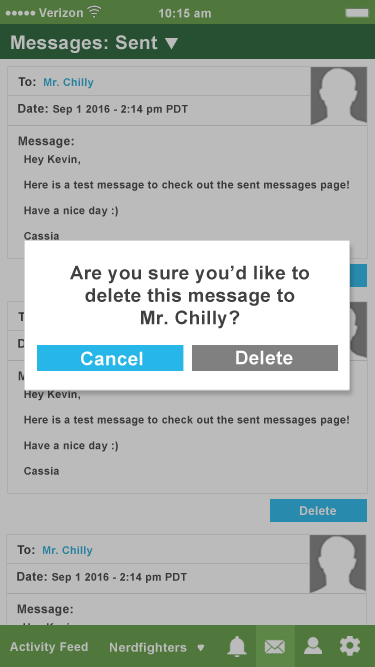
<style>
.page{position:relative;width:375px;height:667px;background:#bbbbbb}
.page>*{position:absolute;margin:0}
.t1{font:12px "Arial-BoldMT";letter-spacing:0.025em;color:#bbbbbb}
.t2{font:18.7px "Arial-BoldMT";letter-spacing:0.025em;color:#bbbbbb}
.t3{font:12px "Arial-BoldMT";letter-spacing:0.025em;color:#333333}
.t4{font:10.7px "Arial-BoldMT";letter-spacing:0.025em;color:#2681a1}
.t5{font:10.7px "Arial-BoldMT";letter-spacing:0.025em;color:#404040}
.t6{font:12px "Arial-BoldMT";letter-spacing:0.025em;color:#404040}
.t7{font:18.7px "Arial-BoldMT";letter-spacing:0.025em;color:#404040}
.t8{font:12px "Arial-BoldMT";letter-spacing:0.025em}
.t9{font:18.7px "Arial-BoldMT";letter-spacing:0.025em;color:#ffffff}
.t10{font:12.5px "Arial-BoldMT";letter-spacing:0.025em;color:#bbbbbb}
</style>
<div class="page">
<p class="t1" style="left:39px;top:8px;width:44px;height:9px">Verizon</p>
<p class="t1" style="left:159px;top:8px;width:52px;height:10px">10:15 am</p>
<p class="t2" style="left:11px;top:35px;width:147px;height:18px">Messages: Sent</p>
<p class="t3" style="left:18px;top:77px;width:18px;height:9px">To:</p>
<p class="t4" style="left:44px;top:78px;width:50px;height:11px">Mr. Chilly</p>
<p class="t5" style="left:18px;top:104px;width:170px;height:11px"><span class="t6">Date: </span>Sep 1 2016 - 2:14 pm PDT</p>
<p class="t6" style="left:18px;top:136px;width:56px;height:12px">Message:</p>
<p class="t5" style="left:24px;top:155px;width:325px;height:85px">Hey Kevin,<br><br>Here is a test message to check out the sent messages page!<br><br>Have a nice day :)<br><br>Cassia</p>
<p class="t7" style="left:70px;top:265px;width:239px;height:64px;text-align:center">Are you sure you’d like to delete this message to <br>Mr. Chilly?</p>
<p class="t8" style="left:18px;top:312px;width:18px;height:9px">To:</p>
<p class="t9" style="left:81px;top:351px;width:62px;height:15px">Cancel</p>
<p class="t9" style="left:236px;top:350px;width:57px;height:15px">Delete</p>
<p class="t5" style="left:24px;top:390px;width:325px;height:85px">Hey Kevin,<br><br>Here is a test message to check out the sent messages page!<br><br>Have a nice day :)<br><br>Cassia</p>
<p class="t1" style="left:300px;top:506px;width:36px;height:9px">Delete</p>
<p class="t3" style="left:17px;top:545px;width:18px;height:9px">To:</p>
<p class="t4" style="left:43px;top:546px;width:50px;height:11px">Mr. Chilly</p>
<p class="t5" style="left:17px;top:572px;width:170px;height:11px"><span class="t6">Date: </span>Sep 1 2016 - 2:14 pm PDT</p>
<p class="t6" style="left:17px;top:604px;width:56px;height:12px">Message:</p>
<p class="t1" style="left:10px;top:642px;width:78px;height:12px">Activity Feed</p>
<p class="t10" style="left:110px;top:642px;width:77px;height:13px">Nerdfighters</p>
</div>
